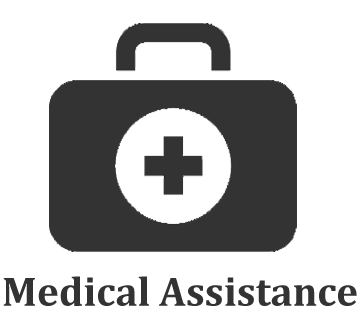
<style>
.page{position:relative;width:360px;height:319px;background:#ffffff}
.page>*{position:absolute;margin:0}
.t1{font:41.8px "Cambria-Bold";color:#333333}
</style>
<div class="page">
<p class="t1" style="left:3px;top:276px;width:354px;height:30px">Medical Assistance</p>
</div>
